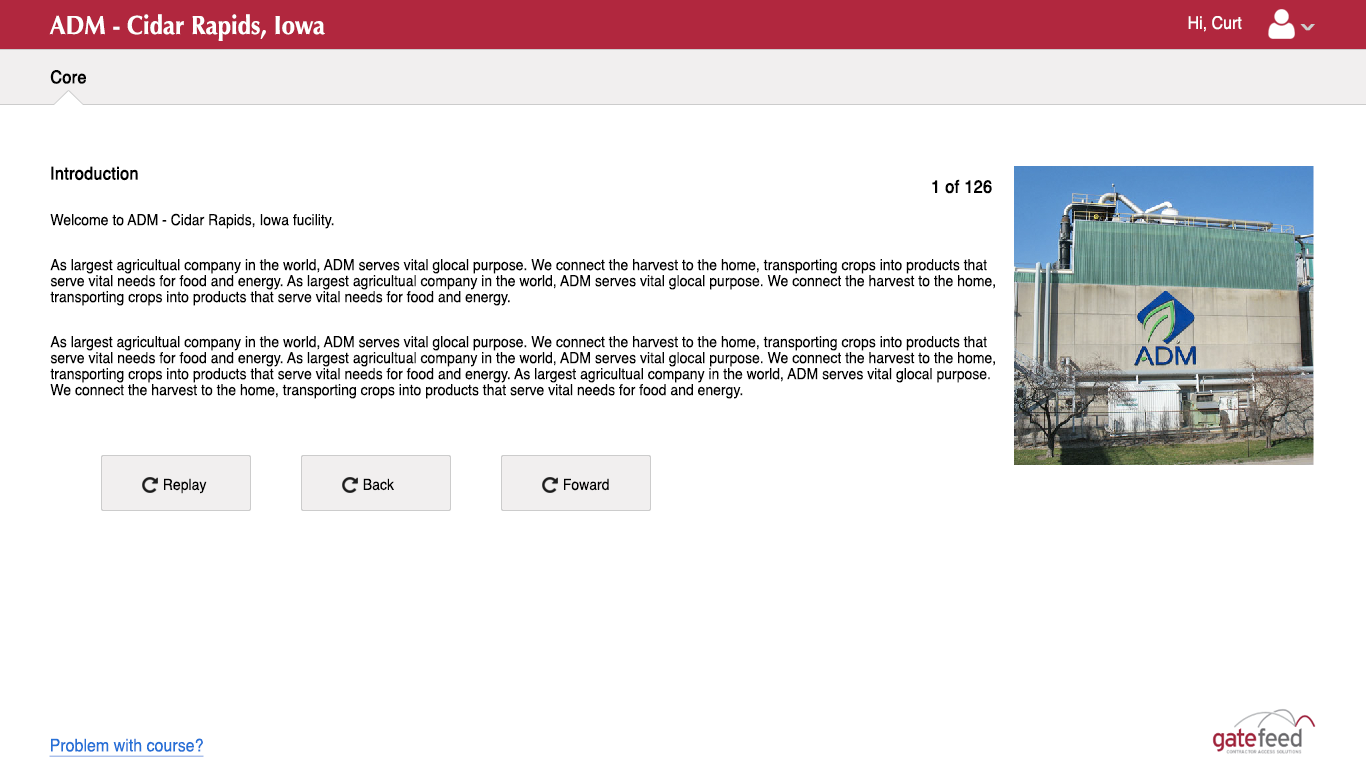
<style>
.page{position:relative;width:1366px;height:768px;background:#ffffff}
.page>*{position:absolute;margin:0}
.t1{font:26.2px "Optima-Bold";color:#ffffff;scale:0.92 1}
.t2{font:17.4px "Helvetica";color:#ffffff;scale:0.92 1}
.t3{font:13.7px "Helvetica";color:#cccccc;font-weight:bold;scale:2.25 1}
.t4{font:17.4px "Helvetica";color:#000000;font-weight:bold;scale:0.92 1}
.t5{font:15.3px/16px "Helvetica";color:#000000;scale:0.92 1}
.t6{font:15.3px "Helvetica";color:#000000;scale:0.92 1}
.t7{font:17.4px "Helvetica";color:#2671d7;text-decoration:underline;scale:0.92 1}
</style>
<div class="page">
<p class="t1" style="left:49px;top:14px;width:276px;height:27px">ADM - Cidar Rapids, Iowa</p>
<p class="t2" style="left:1188px;top:16px;width:54px;height:16px">Hi, Curt</p>
<p class="t3" style="left:1300px;top:24px;width:15px;height:7px;rotate:180deg">^</p>
<p class="t4" style="left:50px;top:70px;width:36px;height:14px">Core</p>
<p class="t4" style="left:51px;top:166px;width:87px;height:15px">Introduction</p>
<p class="t4" style="left:932px;top:179px;width:60px;height:15px">1 of 126</p>
<p class="t5" style="left:50px;top:213px;width:945px;height:186px">Welcome to ADM - Cidar Rapids, Iowa fucility.<br>As largest agricultual company in the world, ADM serves vital glocal purpose. We connect the harvest to the home, transporting crops into products that <br>serve vital needs for food and energy. As largest agricultual company in the world, ADM serves vital glocal purpose. We connect the harvest to the home, <br>transporting crops into products that serve vital needs for food and energy.<br>As largest agricultual company in the world, ADM serves vital glocal purpose. We connect the harvest to the home, transporting crops into products that <br>serve vital needs for food and energy. As largest agricultual company in the world, ADM serves vital glocal purpose. We connect the harvest to the home, <br>transporting crops into products that serve vital needs for food and energy. As largest agricultual company in the world, ADM serves vital glocal purpose. <br>We connect the harvest to the home, transporting crops into products that serve vital needs for food and energy.</p>
<p class="t6" style="left:164px;top:478px;width:43px;height:16px">Replay</p>
<p class="t6" style="left:363px;top:478px;width:31px;height:13px">Back</p>
<p class="t6" style="left:564px;top:478px;width:45px;height:13px">Foward</p>
<p class="t7" style="left:49px;top:738px;width:155px;height:19px">Problem with course?</p>
</div>
